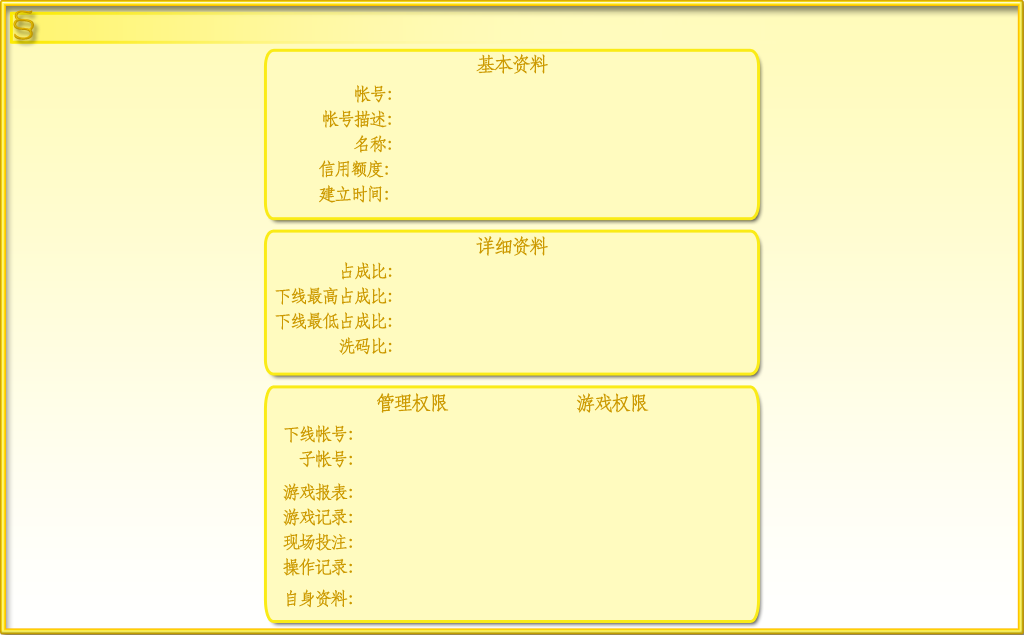
<style>
.page{position:relative;width:1024px;height:635px;background:#fffbbf}
.page>*{position:absolute;margin:0}
.t1{font:38.4px "FZSTK--GBK1-0";letter-spacing:-0.14em;color:#d1a900;font-weight:bold}
.t2{font:20px "STFangsong";letter-spacing:-0.14em;color:#cc9900;font-weight:bold}
.t3{font:18px "STFangsong";letter-spacing:-0.14em;color:#cc9900;font-weight:bold}
</style>
<div class="page">
<p class="t1" style="left:13px;top:10px;width:21px;height:30px">§</p>
<p class="t2" style="left:476px;top:54px;width:72px;height:20px">基本资料</p>
<p class="t3" style="left:355px;top:85px;width:36px;height:18px">帐号：</p>
<p class="t3" style="left:323px;top:110px;width:68px;height:18px">帐号描述：</p>
<p class="t3" style="left:354px;top:135px;width:37px;height:18px">名称：</p>
<p class="t3" style="left:319px;top:160px;width:69px;height:18px">信用额度：</p>
<p class="t3" style="left:319px;top:185px;width:69px;height:18px">建立时间：</p>
<p class="t2" style="left:476px;top:236px;width:72px;height:20px">详细资料</p>
<p class="t3" style="left:342px;top:262px;width:50px;height:18px">占成比：</p>
<p class="t3" style="left:275px;top:287px;width:117px;height:18px">下线最高占成比：</p>
<p class="t3" style="left:275px;top:312px;width:117px;height:18px">下线最低占成比：</p>
<p class="t3" style="left:339px;top:337px;width:53px;height:18px">洗码比：</p>
<p class="t2" style="left:377px;top:393px;width:72px;height:20px">管理权限</p>
<p class="t2" style="left:576px;top:393px;width:73px;height:20px">游戏权限</p>
<p class="t3" style="left:284px;top:425px;width:68px;height:18px">下线帐号：</p>
<p class="t3" style="left:299px;top:450px;width:53px;height:18px">子帐号：</p>
<p class="t3" style="left:283px;top:483px;width:69px;height:18px">游戏报表：</p>
<p class="t3" style="left:283px;top:508px;width:69px;height:18px">游戏记录：</p>
<p class="t3" style="left:283px;top:533px;width:69px;height:18px">现场投注：</p>
<p class="t3" style="left:283px;top:558px;width:69px;height:18px">操作记录：</p>
<p class="t3" style="left:287px;top:589px;width:65px;height:19px">自身资料：</p>
</div>
